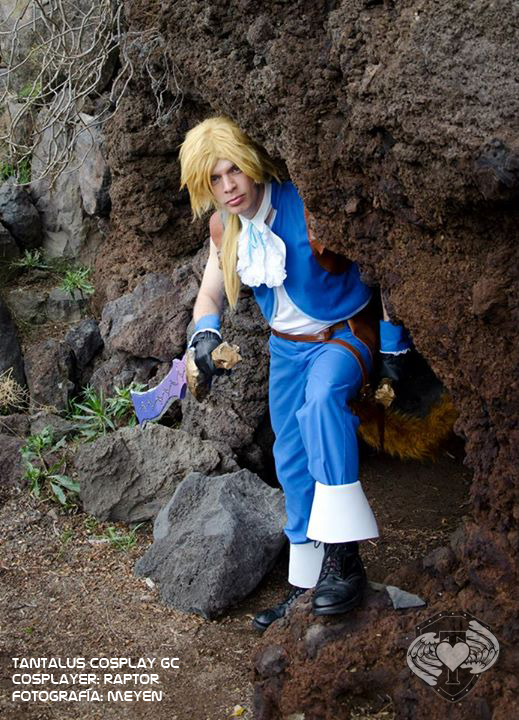
<style>
.page{position:relative;width:519px;height:720px}
.page>*{position:absolute;margin:0}
.t1{font:14px "NasalizationRg-Regular";color:#ffffff}
</style>
<div class="page">
<p class="t1" style="left:12px;top:658px;width:167px;height:43px">tantalus cosplay gc<br>cosplayer: raptor<br>fotografía: meyen</p>
</div>
